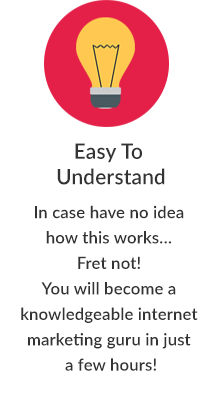
<style>
.page{position:relative;width:216px;height:398px;background:#ffffff}
.page>*{position:absolute;margin:0}
.t1{font:17px/25.4px "Lato-Semibold";letter-spacing:0.01em;color:#333333}
.t2{font:21.2px "Lato-Semibold";letter-spacing:0.01em;color:#333333}
.t3{font:17px/33.9px "Lato-Semibold";letter-spacing:0.01em;color:#333333}
</style>
<div class="page">
<p class="t1" style="left:21px;top:143px;width:177px;height:228px;text-align:center"><span class="t2">Easy To <br>Understand<br></span>I<span class="t3">n case have no idea <br></span>how this works… <br>Fret not! <br>You will become a <br>knowledgeable internet <br>marketing guru in just <br>a few hours!</p>
</div>
